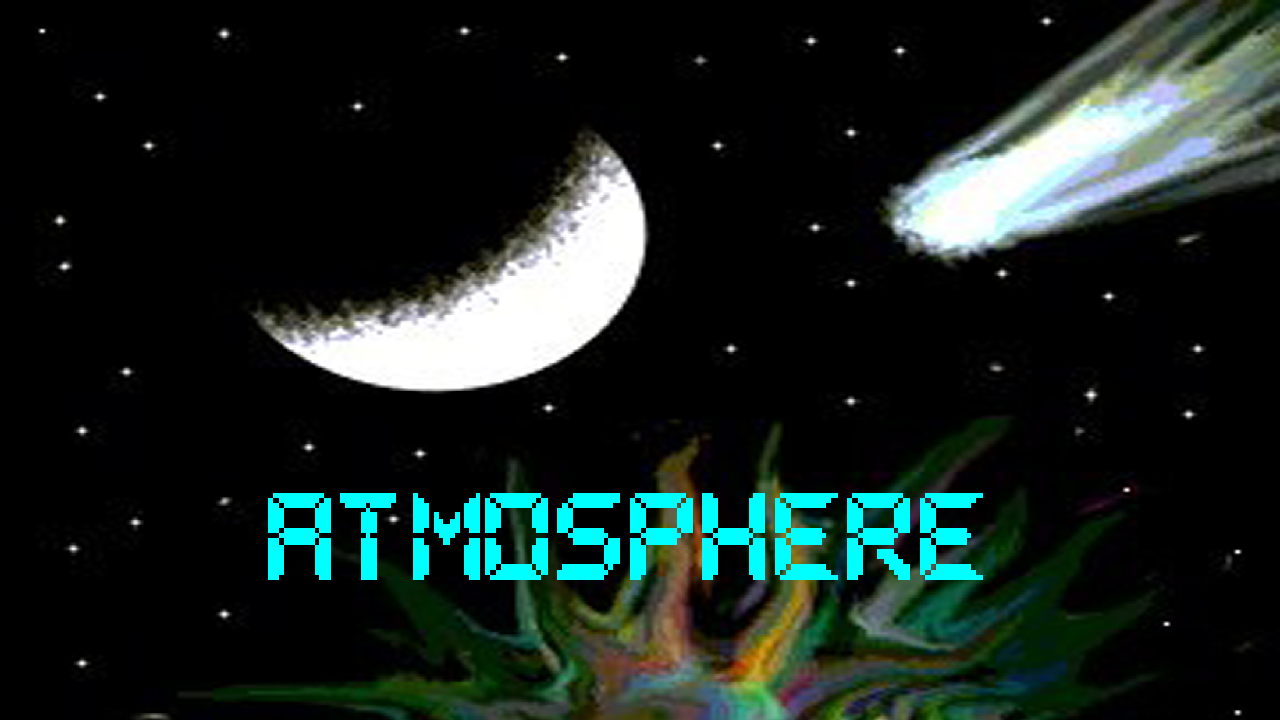
<style>
.page{position:relative;width:1280px;height:720px;background:#000000}
.page>*{position:absolute;margin:0}
.t1{font:103px "Pixel LCD-7";color:#00ffff}
</style>
<div class="page">
<p class="t1" style="left:268px;top:493px;width:715px;height:87px">ATmosphere</p>
</div>
